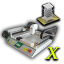
<style>
.page{position:relative;width:64px;height:64px;background:#ffffff}
.page>*{position:absolute;margin:0}
.t1{font:16px "TrajanPro-Bold";color:#deff01;font-style:italic}
</style>
<div class="page">
<p class="t1" style="left:45px;top:47px;width:15px;height:12px">X</p>
</div>
